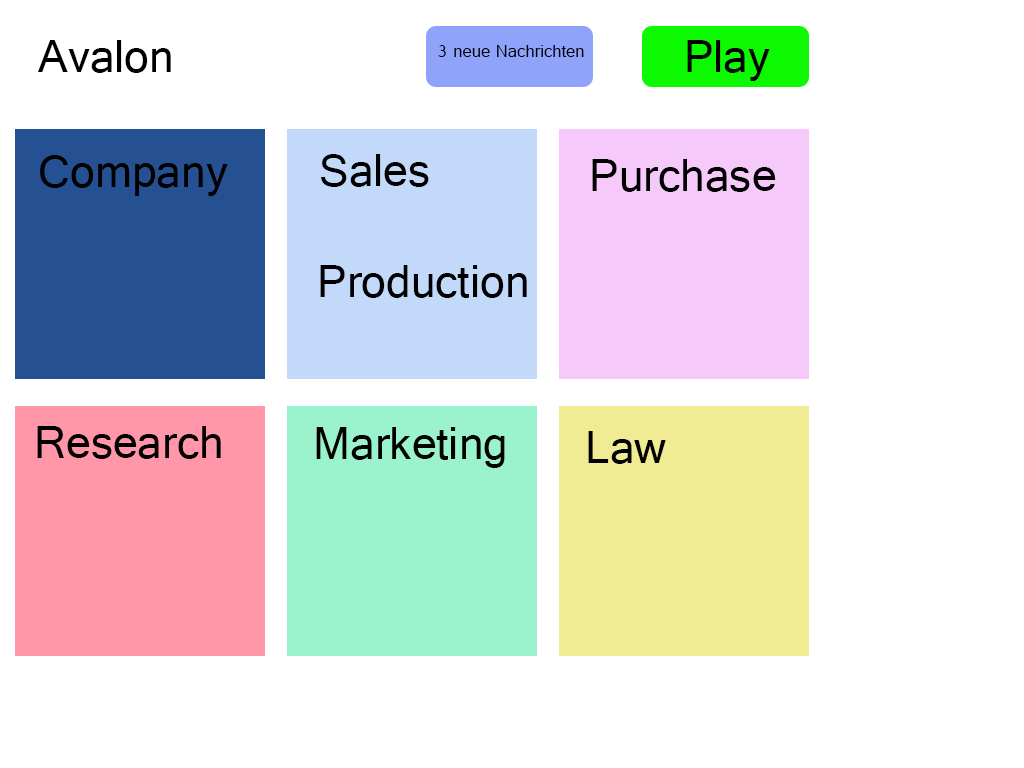
<style>
.page{position:relative;width:1024px;height:768px;background:#ffffff}
.page>*{position:absolute;margin:0}
.t1{font:48px "Gautami";color:#000000}
.t2{font:18px "Gautami";color:#000000}
</style>
<div class="page">
<p class="t1" style="left:38px;top:40px;width:133px;height:33px">Avalon</p>
<p class="t1" style="left:687px;top:40px;width:83px;height:41px">Play</p>
<p class="t2" style="left:438px;top:45px;width:146px;height:12px">3 neue Nachrichten</p>
<p class="t1" style="left:40px;top:155px;width:188px;height:41px">Company</p>
<p class="t1" style="left:321px;top:154px;width:108px;height:33px">Sales</p>
<p class="t1" style="left:592px;top:159px;width:184px;height:33px">Purchase</p>
<p class="t1" style="left:320px;top:265px;width:207px;height:33px">Production</p>
<p class="t1" style="left:37px;top:426px;width:184px;height:33px">Research</p>
<p class="t1" style="left:316px;top:427px;width:189px;height:41px">Marketing</p>
<p class="t1" style="left:588px;top:431px;width:78px;height:33px">Law</p>
</div>
